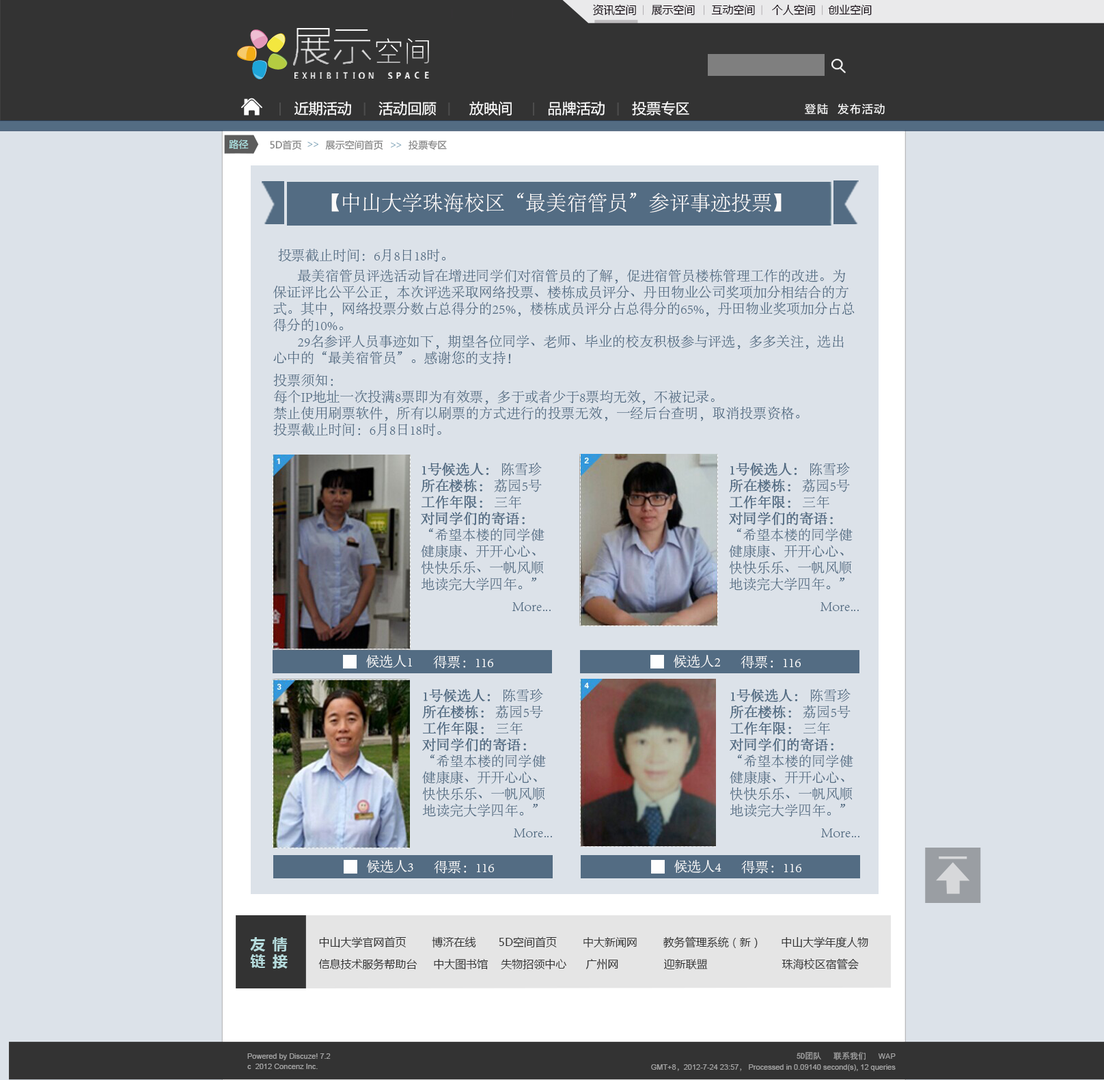
<style>
.page{position:relative;width:1104px;height:1080px;background:#dce2e9}
.page>*{position:absolute;margin:0}
.t1{font:10.9px "MicrosoftYaHei";color:#0c020b}
.t2{font:14.4px "MicrosoftYaHei";color:#ffffff}
.t3{font:10.9px "MicrosoftYaHei";letter-spacing:0.1em;color:#ffffff}
.t4{font:9.6px "MicrosoftYaHei";color:#b1e8e8}
.t5{font:9.6px "MicrosoftYaHei";color:#808080}
.t6{font:9.6px "MyriadPro-Regular";color:#7fa5ba}
.t7{font:20.5px "AdobeSongStd-Light";color:#fcfafa}
.t8{font:13.7px "AdobeSongStd-Light";color:#536c83}
.t9{font:13.7px "AdobeSongStd-Light";color:#536c83;font-weight:bold}
.t10{font:13.7px "AdobeSongStd-Light";color:#fefefe}
.t11{font:14.4px "MicrosoftYaHei-Bold";letter-spacing:0.1em;color:#b5dbdc}
.t12{font:10.9px/21.9px "MicrosoftYaHei";color:#333333}
.t13{font:7.5px "ArialMT";color:#a3a3a3}
.t14{font:8.2px "SimHei";color:#a3a3a3}
.t15{font:7.5px "AdobeSongStd-Light";color:#a3a3a3}
</style>
<div class="page">
<p class="t1" style="left:593px;top:4px;width:43px;height:12px">资讯空间</p>
<p class="t1" style="left:652px;top:4px;width:43px;height:11px">展示空间</p>
<p class="t1" style="left:711px;top:4px;width:44px;height:11px">互动空间</p>
<p class="t1" style="left:772px;top:4px;width:43px;height:11px">个人空间</p>
<p class="t1" style="left:828px;top:4px;width:44px;height:11px">创业空间</p>
<p class="t2" style="left:295px;top:101px;width:56px;height:14px">近期活动</p>
<p class="t2" style="left:379px;top:101px;width:58px;height:14px">活动回顾</p>
<p class="t2" style="left:469px;top:101px;width:43px;height:14px">放映间</p>
<p class="t2" style="left:548px;top:101px;width:57px;height:14px">品牌活动</p>
<p class="t2" style="left:632px;top:101px;width:58px;height:14px">投票专区</p>
<p class="t3" style="left:805px;top:103px;width:80px;height:12px">登陆  发布活动</p>
<p class="t4" style="left:229px;top:139px;width:20px;height:10px">路径</p>
<p class="t5" style="left:270px;top:140px;width:32px;height:10px">5D首页</p>
<p class="t6" style="left:308px;top:141px;width:10px;height:6px">&gt;&gt;</p>
<p class="t5" style="left:325px;top:140px;width:58px;height:10px">展示空间首页</p>
<p class="t6" style="left:391px;top:142px;width:11px;height:6px">&gt;&gt;</p>
<p class="t5" style="left:409px;top:140px;width:38px;height:10px">投票专区</p>
<p class="t7" style="left:331px;top:193px;width:451px;height:20px">【中山大学珠海校区“最美宿管员”参评事迹投票】</p>
<p class="t8" style="left:278px;top:248px;width:168px;height:14px">投票截止时间：6月8日18时。</p>
<p class="t8" style="left:273px;top:269px;width:582px;height:96px">最美宿管员评选活动旨在增进同学们对宿管员的了解，促进宿管员楼栋管理工作的改进。为<br>保证评比公平公正，本次评选采取网络投票、楼栋成员评分、丹田物业公司奖项加分相结合的方<br>式。其中，网络投票分数占总得分的25%，楼栋成员评分占总得分的65%，丹田物业奖项加分占总<br>得分的10%。<br> 29名参评人员事迹如下，期望各位同学、老师、毕业的校友积极参与评选，多多关注，选出<br>心中的“最美宿管员”。感谢您的支持！</p>
<p class="t8" style="left:273px;top:373px;width:527px;height:63px">投票须知：<br>每个IP地址一次投满8票即为有效票，多于或者少于8票均无效，不被记录。<br>禁止使用刷票软件，所有以刷票的方式进行的投票无效，一经后台查明，取消投票资格。<br>投票截止时间：6月8日18时。</p>
<p class="t8" style="left:421px;top:462px;width:124px;height:128px"><span class="t9">1号候选人：</span> 陈雪珍 <br><span class="t9">所在楼栋：</span> 荔园5号 <br><span class="t9">工作年限：</span> 三年 <br><span class="t9">对同学们的寄语： <br></span>“希望本楼的同学健<br>健康康、开开心心、<br>快快乐乐、一帆风顺<br>地读完大学四年。”</p>
<p class="t8" style="left:729px;top:462px;width:124px;height:128px"><span class="t9">1号候选人：</span> 陈雪珍 <br><span class="t9">所在楼栋：</span> 荔园5号 <br><span class="t9">工作年限：</span> 三年 <br><span class="t9">对同学们的寄语： <br></span>“希望本楼的同学健<br>健康康、开开心心、<br>快快乐乐、一帆风顺<br>地读完大学四年。”</p>
<p class="t8" style="left:512px;top:602px;width:39px;height:9px">More...</p>
<p class="t8" style="left:820px;top:602px;width:39px;height:9px">More...</p>
<p class="t10" style="left:366px;top:655px;width:46px;height:13px">候选人1</p>
<p class="t10" style="left:433px;top:655px;width:60px;height:13px">得票：116</p>
<p class="t10" style="left:674px;top:655px;width:46px;height:13px">候选人2</p>
<p class="t10" style="left:741px;top:655px;width:60px;height:13px">得票：116</p>
<p class="t8" style="left:422px;top:688px;width:124px;height:129px"><span class="t9">1号候选人：</span> 陈雪珍 <br><span class="t9">所在楼栋：</span> 荔园5号 <br><span class="t9">工作年限：</span> 三年 <br><span class="t9">对同学们的寄语： <br></span>“希望本楼的同学健<br>健康康、开开心心、<br>快快乐乐、一帆风顺<br>地读完大学四年。”</p>
<p class="t8" style="left:730px;top:688px;width:124px;height:129px"><span class="t9">1号候选人：</span> 陈雪珍 <br><span class="t9">所在楼栋：</span> 荔园5号 <br><span class="t9">工作年限：</span> 三年 <br><span class="t9">对同学们的寄语： <br></span>“希望本楼的同学健<br>健康康、开开心心、<br>快快乐乐、一帆风顺<br>地读完大学四年。”</p>
<p class="t8" style="left:513px;top:828px;width:39px;height:9px">More...</p>
<p class="t8" style="left:821px;top:828px;width:39px;height:9px">More...</p>
<p class="t10" style="left:367px;top:860px;width:46px;height:13px">候选人3</p>
<p class="t10" style="left:434px;top:860px;width:60px;height:13px">得票：116</p>
<p class="t10" style="left:675px;top:860px;width:47px;height:13px">候选人4</p>
<p class="t10" style="left:741px;top:860px;width:61px;height:13px">得票：116</p>
<p class="t11" style="left:250px;top:937px;width:38px;height:31px">友 情 <br>链 接</p>
<p class="t12" style="left:318px;top:936px;width:551px;height:34px">中山大学官网首页        博济在线       5D空间首页        中大新闻网        教务管理系统（新）      中山大学年度人物 <br>信息技术服务帮助台     中大图书馆    失物招领中心      广州网              迎新联盟                       珠海校区宿管会</p>
<p class="t13" style="left:247px;top:1053px;width:84px;height:7px">Powered by Discuze! 7.2</p>
<p class="t14" style="left:797px;top:1052px;width:24px;height:8px">5D团队</p>
<p class="t14" style="left:834px;top:1052px;width:32px;height:8px">联系我们</p>
<p class="t13" style="left:878px;top:1053px;width:18px;height:6px">WAP</p>
<p class="t13" style="left:247px;top:1063px;width:71px;height:6px">c  2012 Concenz Inc.</p>
<p class="t13" style="left:651px;top:1064px;width:245px;height:7px">GMT+8<span class="t15">，</span>2012-7-24 23:57<span class="t15">，</span> Processed in 0.09140 second(s), 12 queries</p>
</div>
